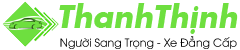
<style>
.page{position:relative;width:240px;height:50px;background:#ffffff}
.page>*{position:absolute;margin:0}
.t1{font:30px "SFUFuturaBoldOblique";color:#6edf3f}
.t2{font:11px "UTM-Avo";color:#000000}
</style>
<div class="page">
<p class="t1" style="left:59px;top:3px;width:179px;height:31px">ThanhThịnh</p>
<p class="t2" style="left:60px;top:36px;width:177px;height:13px">Người Sang Trọng - Xe Đẳng Cấp</p>
</div>
